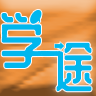
<style>
.page{position:relative;width:96px;height:96px}
.page>*{position:absolute;margin:0}
.t1{font:60px "zcoolqingkehuangyouti-Regular";letter-spacing:0.06em;color:#00b7ee}
.t2{font:52.7px "zcoolqingkehuangyouti-Regular";letter-spacing:0.06em;color:#00b7ee}
</style>
<div class="page">
<p class="t1" style="left:1px;top:13px;width:40px;height:55px">学</p>
<p class="t2" style="left:56px;top:42px;width:36px;height:50px">途</p>
</div>
